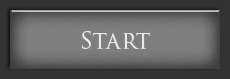
<style>
.page{position:relative;width:230px;height:79px;background:#333333}
.page>*{position:absolute;margin:0}
.t1{font:24px "TrajanPro3-Regular";color:#e9e9e9}
</style>
<div class="page">
<p class="t1" style="left:82px;top:31px;width:68px;height:18px">Start</p>
</div>
